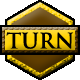
<style>
.page{position:relative;width:80px;height:80px;background:#ffffff}
.page>*{position:absolute;margin:0}
.t1{font:20.8px "TrajanPro-Bold";color:#000000}
</style>
<div class="page">
<p class="t1" style="left:6px;top:32px;width:68px;height:17px">TURN</p>
</div>
